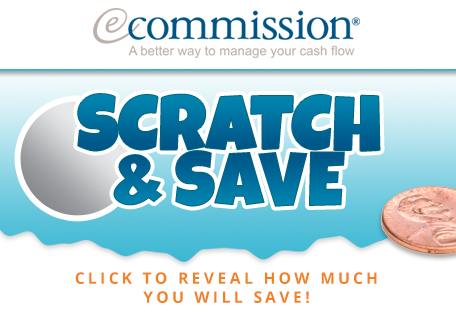
<style>
.page{position:relative;width:456px;height:334px;background:#ffffff}
.page>*{position:absolute;margin:0}
.t1{font:77.2px "LuckiestGuy-Regular";color:#006d9b;text-transform:uppercase}
.t2{font:77.2px "LuckiestGuy-Regular";color:#006c99;text-transform:uppercase}
.t3{font:15.8px "OpenSans-Bold";letter-spacing:0.2em;color:#f48121;text-transform:uppercase}
</style>
<div class="page">
<p class="t1" style="left:78px;top:94px;width:302px;height:57px">Scratch</p>
<p class="t2" style="left:113px;top:150px;width:232px;height:57px">&amp; Save</p>
<p class="t3" style="left:75px;top:272px;width:302px;height:31px;text-align:center">Click to reveal how much<br>you will save!</p>
</div>
